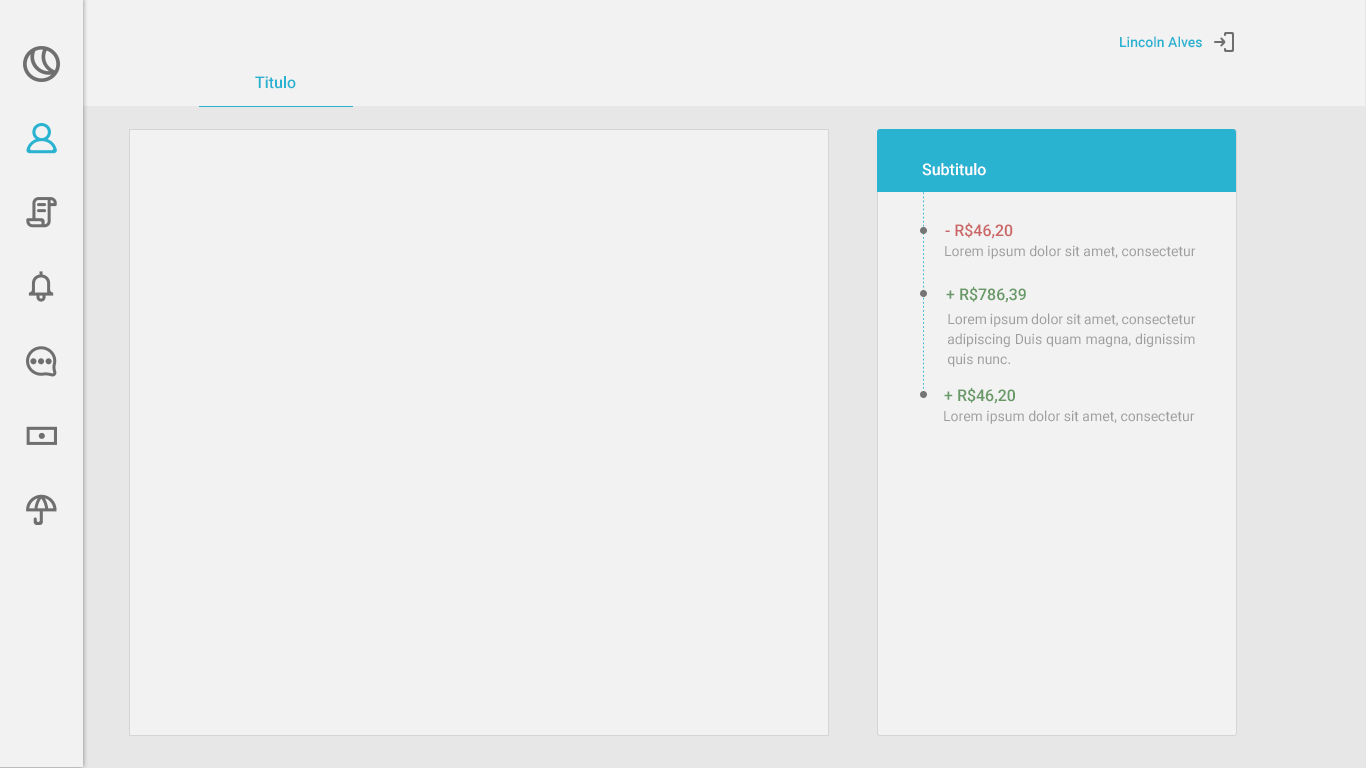
<style>
.page{position:relative;width:1366px;height:768px;background:#f2f2f2}
.page>*{position:absolute;margin:0}
.t1{font:14px "Roboto-Medium";color:#29b3d1}
.t2{font:16px "Roboto-Medium";color:#29b3d1}
.t3{font:16px "Roboto-Medium";color:#ffffff}
.t4{font:16px "Roboto-Medium";color:#cc6666}
.t5{font:14px "Roboto-Regular";color:#9e9e9e}
.t6{font:16px "Roboto-Medium";color:#669966}
.t7{font:14px/20px "Roboto-Regular";color:#9e9e9e}
</style>
<div class="page">
<p class="t1" style="left:1120px;top:36px;width:82px;height:12px">Lincoln Alves</p>
<p class="t2" style="left:255px;top:76px;width:41px;height:13px">Titulo</p>
<p class="t3" style="left:922px;top:163px;width:64px;height:13px">Subtitulo</p>
<p class="t4" style="left:945px;top:222px;width:68px;height:17px">- R$46,20</p>
<p class="t5" style="left:945px;top:245px;width:251px;height:14px">Lorem ipsum dolor sit amet, consectetur</p>
<p class="t6" style="left:946px;top:286px;width:80px;height:17px">+ R$786,39</p>
<p class="t7" style="left:948px;top:313px;width:248px;height:54px;text-align:justify">Lorem ipsum dolor sit amet, consectetur adipiscing Duis quam magna, dignissim quis nunc.</p>
<p class="t6" style="left:944px;top:387px;width:71px;height:17px">+ R$46,20</p>
<p class="t5" style="left:944px;top:410px;width:251px;height:14px">Lorem ipsum dolor sit amet, consectetur</p>
</div>
